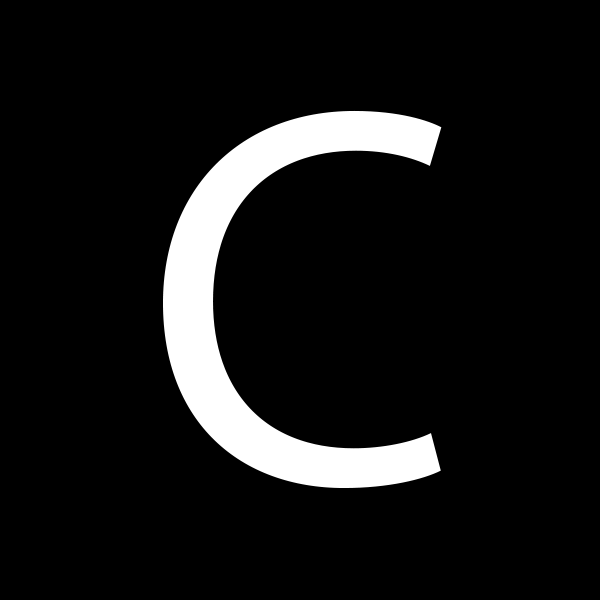
<style>
.page{position:relative;width:600px;height:600px;background:#000000}
.page>*{position:absolute;margin:0}
.t1{font:543.6px "MyriadPro-Regular";color:#ffffff}
</style>
<div class="page">
<p class="t1" style="left:163px;top:110px;width:279px;height:378px">C</p>
</div>
